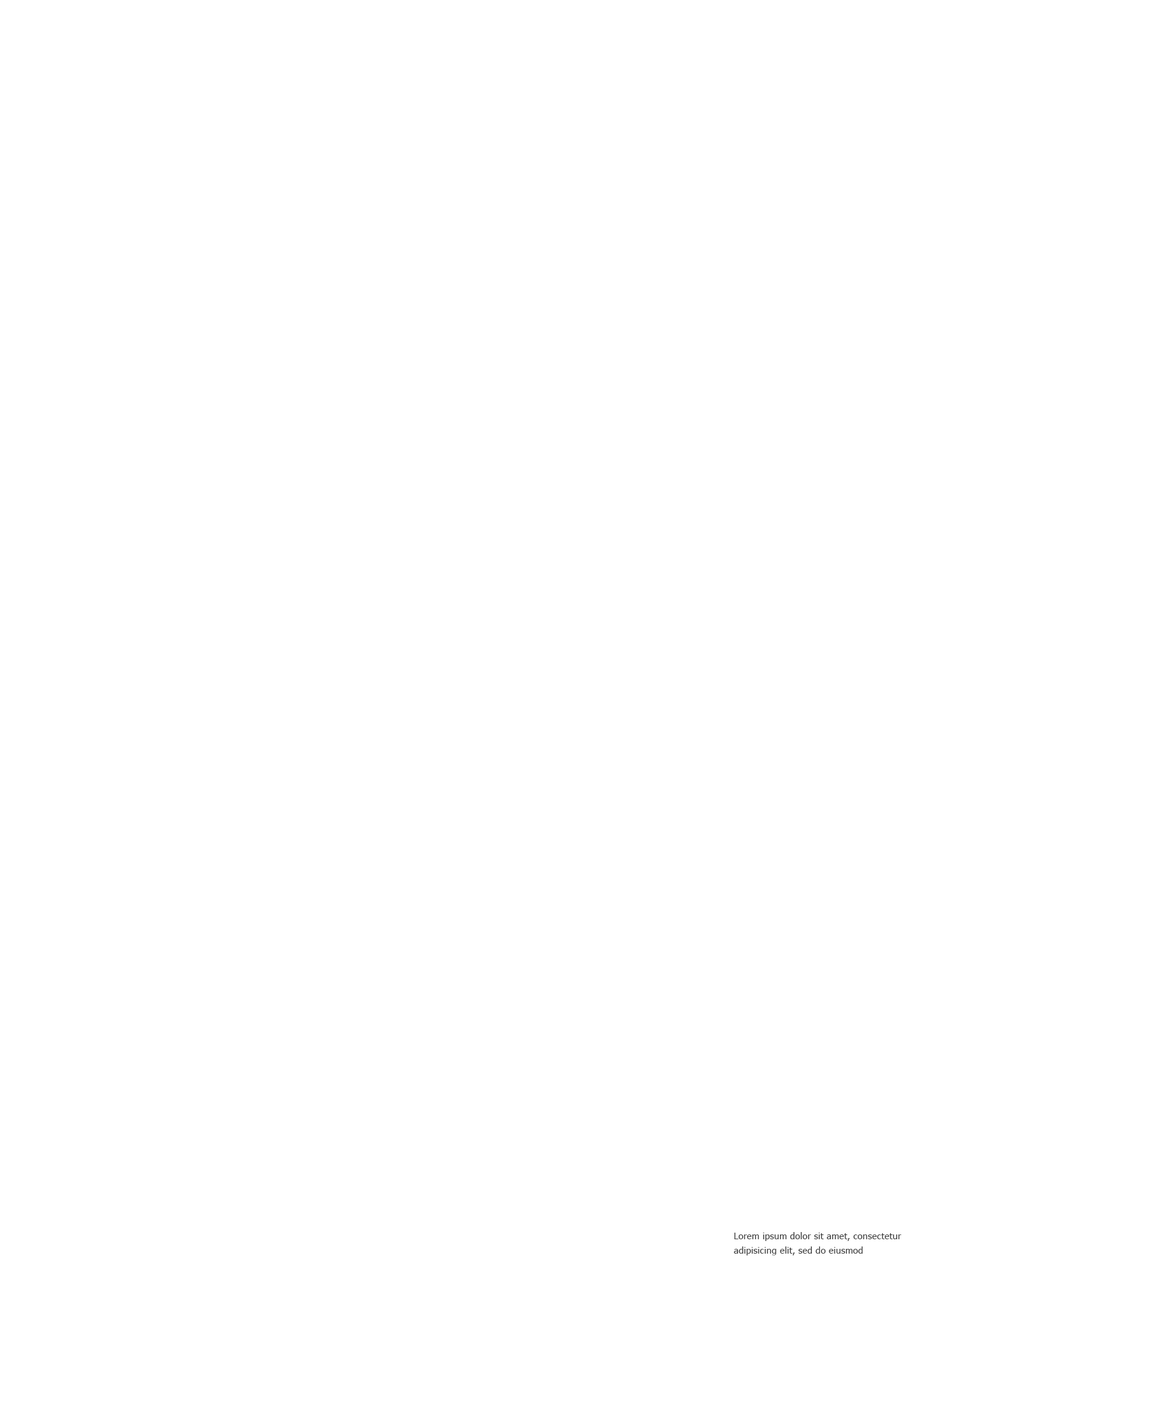
<style>
.page{position:relative;width:1152px;height:1412px;background:#ffffff}
.page>*{position:absolute;margin:0}
.t1{font:9px/14.4px "Tahoma";letter-spacing:0.02em;color:#3f3f3f}
</style>
<div class="page">
<p class="t1" style="left:734px;top:1232px;width:167px;height:24px">Lorem ipsum dolor sit amet, consectetur adipisicing elit, sed do eiusmod</p>
</div>
